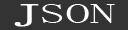
<style>
.page{position:relative;width:128px;height:30px;background:#333333}
.page>*{position:absolute;margin:0}
.t1{font:28.8px "SimSun";color:#ffffff;scale:1.75 1}
.t2{font:28.8px "SimSun";color:#ffffff;font-weight:bold;scale:1.75 1}
</style>
<div class="page">
<p class="t1" style="left:14px;top:4px;width:101px;height:23px"><span class="t2">J</span>SON</p>
</div>
